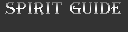
<style>
.page{position:relative;width:128px;height:32px;background:#333333}
.page>*{position:absolute;margin:0}
.t1{font:18px "AlgerianBasD";letter-spacing:0.05em}
</style>
<div class="page">
<p class="t1" style="left:5px;top:2px;width:116px;height:13px">SPIRIT GUIDE</p>
</div>
